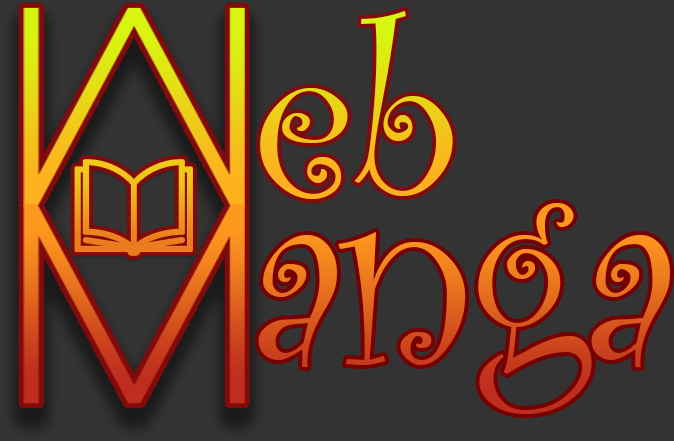
<style>
.page{position:relative;width:674px;height:441px;background:#333333}
.page>*{position:absolute;margin:0}
.t1{font:244px "CurlzMT";letter-spacing:-0.01em;color:#f2c41a}
.t2{font:267.2px "CurlzMT";letter-spacing:-0.025em}
</style>
<div class="page">
<p class="t1" style="left:260px;top:11px;width:193px;height:188px">eb</p>
<p class="t2" style="left:258px;top:203px;width:412px;height:211px">anga</p>
</div>
